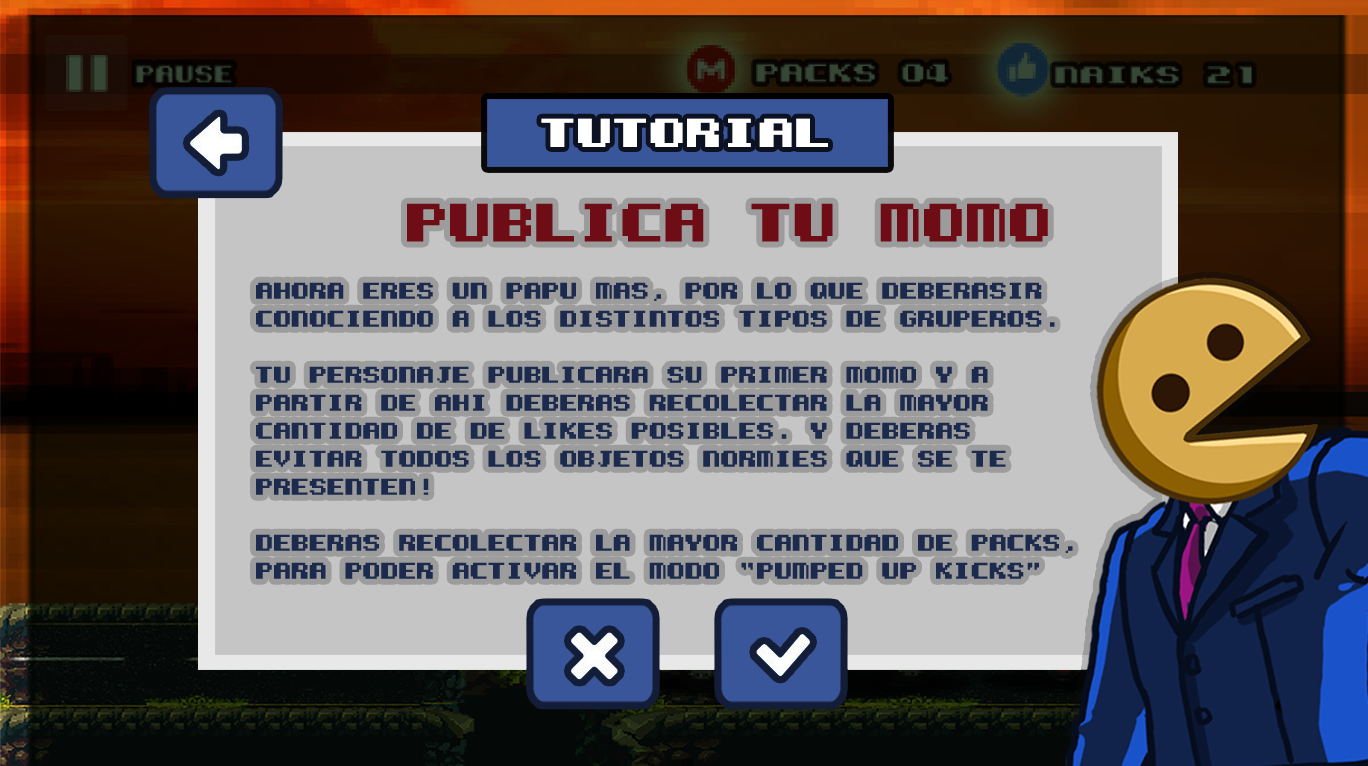
<style>
.page{position:relative;width:1368px;height:766px;background:#c5c5c5}
.page>*{position:absolute;margin:0}
.t1{font:41.5px "KemcoPixelBold";color:#ffffff;scale:1.12 1}
.t2{font:55.4px "KemcoPixelBold";color:#6e0d16}
.t3{font:23.3px "KemcoPixelBold";color:#1c2a4e}
</style>
<div class="page">
<p class="t1" style="left:541px;top:118px;width:287px;height:29px">tutorial</p>
<p class="t1" style="left:541px;top:118px;width:287px;height:29px">tutorial</p>
<p class="t2" style="left:407px;top:203px;width:641px;height:39px">publica tu momo</p>
<p class="t3" style="left:256px;top:282px;width:817px;height:297px">ahora eres un papu mas, por lo que deberasir <br>conociendo a los distintos tipos de gruperos.<br><br>tu personaje publicara su primer momo y a <br>partir de ahi deberas recolectar la mayor<br>cantidad de de likes posibles. y deberas <br>evitar todos los objetos normies que se te <br>presenten!<br><br>deberas recolectar la mayor cantidad de packs,<br>para poder activar el modo “pumped up kicks”</p>
</div>
